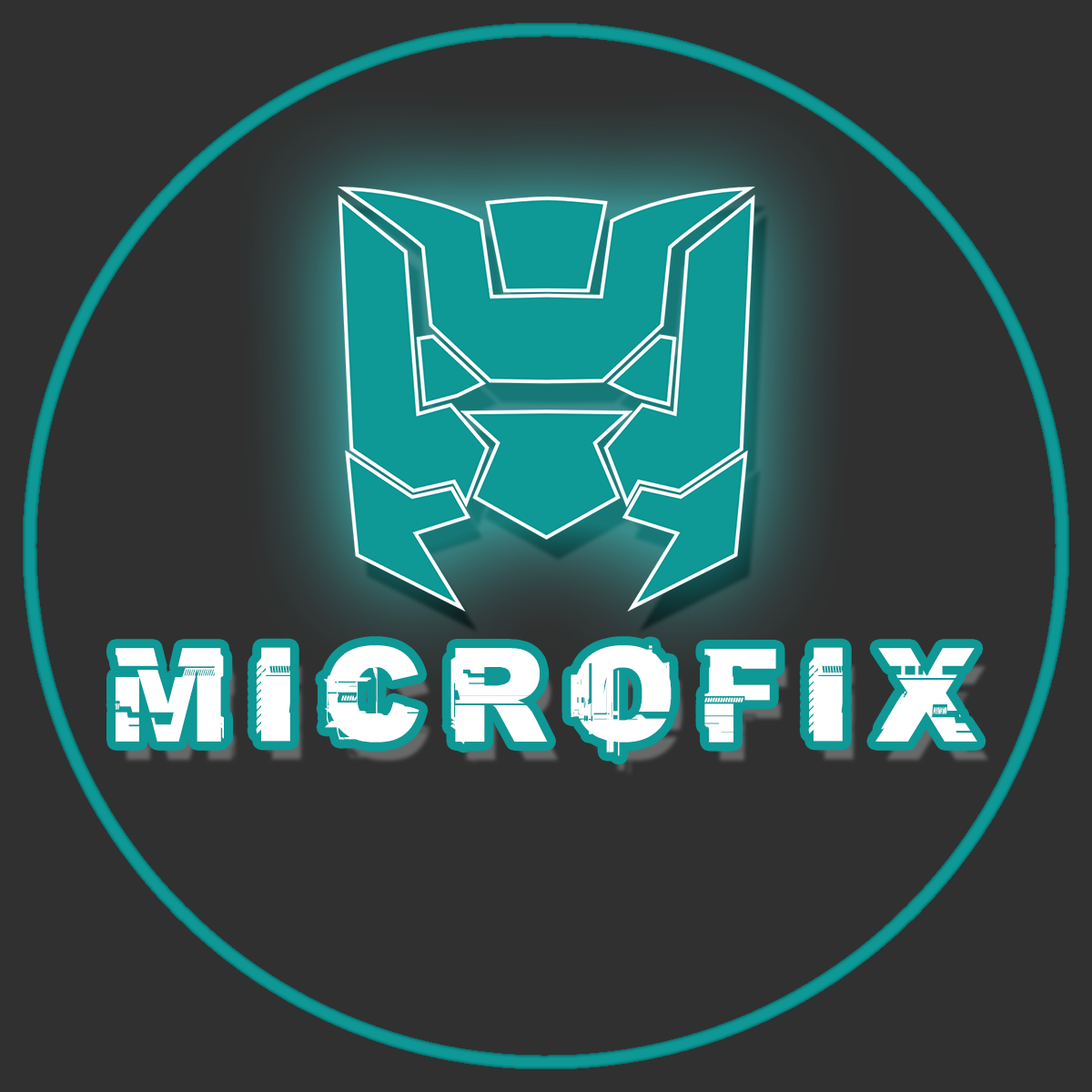
<style>
.page{position:relative;width:1092px;height:1092px;background:#303030}
.page>*{position:absolute;margin:0}
.t1{font:119px "CFGlitchCity-Regular";letter-spacing:0.2em;color:#ffffff}
</style>
<div class="page">
<p class="t1" style="left:115px;top:645px;width:862px;height:111px">MICROFIX</p>
</div>
